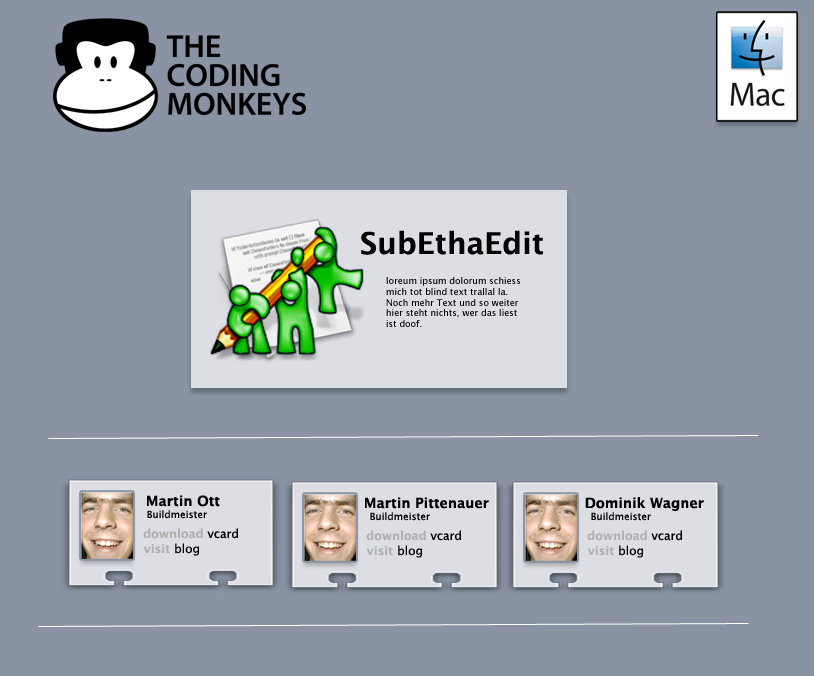
<style>
.page{position:relative;width:814px;height:676px;background:#8993a3}
.page>*{position:absolute;margin:0}
.t1{font:30px "LucidaGrande-Bold";color:#000000}
.t2{font:9px "LucidaGrande";color:#000000}
.t3{font:14px "LucidaGrande-Bold";color:#000000}
.t4{font:10px "LucidaGrande";color:#000000}
.t5{font:12px "LucidaGrande-Bold";color:#b1b1b1}
.t6{font:12px "LucidaGrande";color:#000000}
</style>
<div class="page">
<p class="t1" style="left:361px;top:230px;width:182px;height:25px">SubEthaEdit</p>
<p class="t2" style="left:386px;top:277px;width:134px;height:50px">loreum ipsum dolorum schiess mich tot blind text trallal la. Noch mehr Text und so weiter hier steht nichts, wer das liest ist doof.</p>
<p class="t3" style="left:147px;top:495px;width:73px;height:12px">Martin Ott</p>
<p class="t3" style="left:365px;top:497px;width:124px;height:12px">Martin Pittenauer</p>
<p class="t3" style="left:585px;top:497px;width:119px;height:14px">Dominik Wagner</p>
<p class="t4" style="left:147px;top:510px;width:60px;height:9px">Buildmeister</p>
<p class="t4" style="left:370px;top:512px;width:60px;height:9px">Buildmeister</p>
<p class="t4" style="left:591px;top:512px;width:60px;height:9px">Buildmeister</p>
<p class="t5" style="left:143px;top:528px;width:95px;height:11px">download <span class="t6">vcard</span></p>
<p class="t5" style="left:366px;top:530px;width:95px;height:11px">download <span class="t6">vcard</span></p>
<p class="t5" style="left:587px;top:530px;width:95px;height:11px">download <span class="t6">vcard</span></p>
<p class="t5" style="left:143px;top:543px;width:56px;height:13px">visit <span class="t6">blog</span></p>
<p class="t5" style="left:366px;top:545px;width:56px;height:13px">visit <span class="t6">blog</span></p>
<p class="t5" style="left:587px;top:545px;width:56px;height:13px">visit <span class="t6">blog</span></p>
</div>
